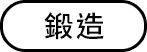
<style>
.page{position:relative;width:147px;height:52px;background:#ffffff}
.page>*{position:absolute;margin:0}
.t1{font:29.2px "NotoSansCJKtc-Medium";letter-spacing:0.06em;color:#060606}
</style>
<div class="page">
<p class="t1" style="left:44px;top:12px;width:60px;height:28px">鍛造</p>
</div>
